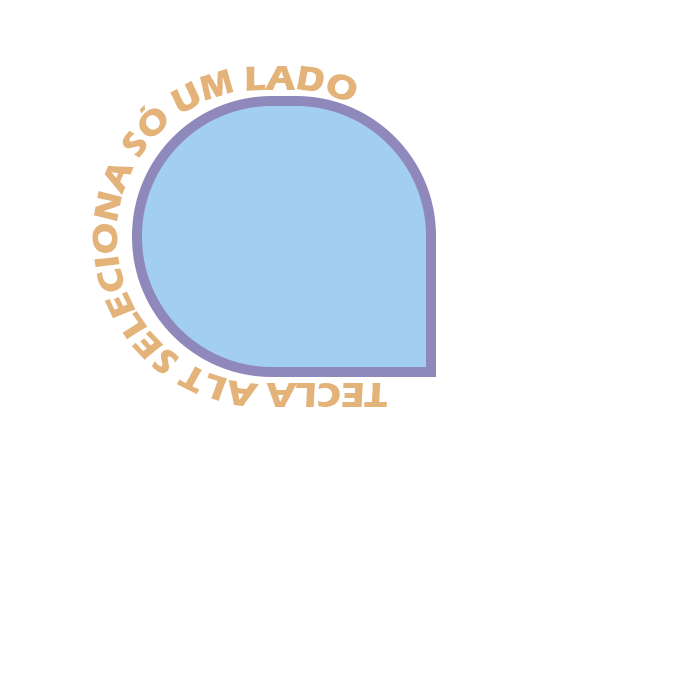
<style>
.page{position:relative;width:700px;height:700px;background:#ffffff}
.page>*{position:absolute;margin:0}
.t1{font:36px "ErasITC-Bold";color:#e3b37a}
</style>
<div class="page">
<p class="t1" style="left:92px;top:65px;width:295px;height:342px">TECLA ALT SELECIONA SÓ UM LADO</p>
</div>
